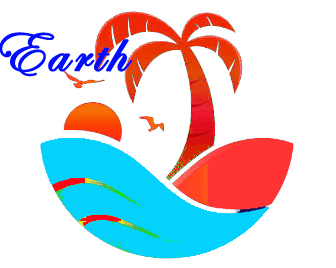
<style>
.page{position:relative;width:336px;height:268px;background:#ffffff}
.page>*{position:absolute;margin:0}
.t1{font:60px "EdwardianScriptITC";letter-spacing:0.05em;color:#010dfe;font-weight:bold}
</style>
<div class="page">
<p class="t1" style="left:0px;top:32px;width:133px;height:45px">Earth</p>
</div>
